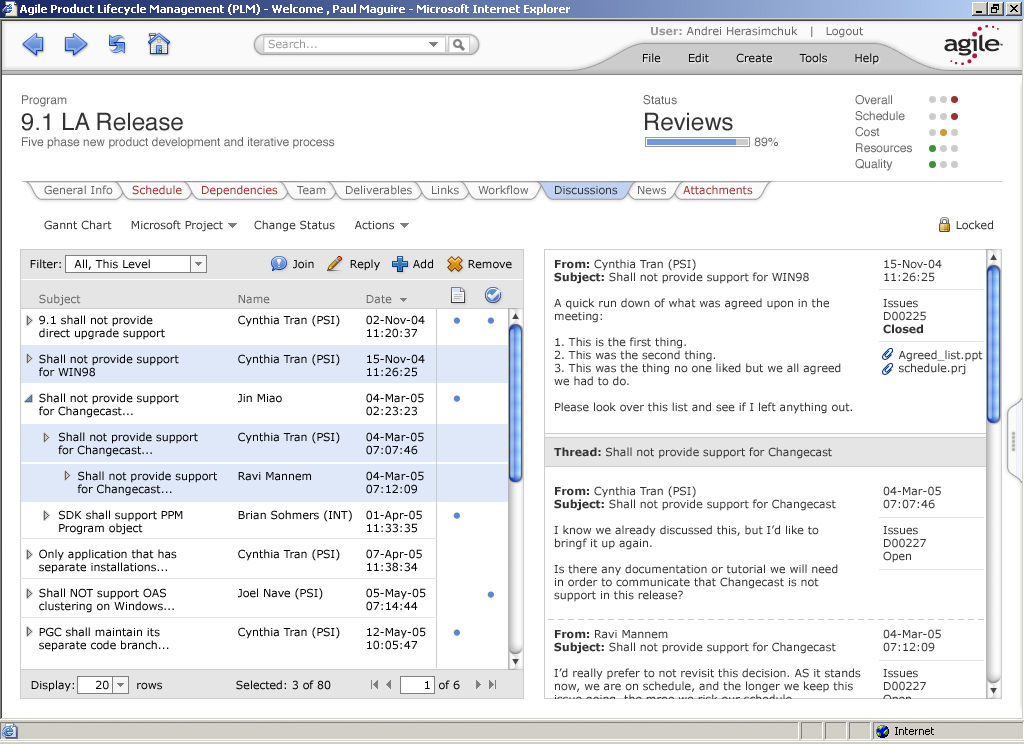
<style>
.page{position:relative;width:1024px;height:744px;background:#ffffff}
.page>*{position:absolute;margin:0}
.t1{font:11px "Verdana";color:#666666}
.t2{font:11px "Verdana-Bold";color:#999999}
.t3{font:11px "Verdana";color:#999999}
.t4{font:11px "Verdana";color:#000000}
.t5{font:12px/16px "Helvetica";color:#666666}
.t6{font:24px/26px "Helvetica";color:#333333}
.t7{font:32px/16px "Helvetica";color:#cccccc}
.t8{font:32px/16px "Helvetica";color:#993333}
.t9{font:32px/16px "Helvetica";color:#cc9933}
.t10{font:32px/16px "Helvetica";color:#339933}
.t11{font:11px "Verdana";color:#993333}
.t12{font:11px "Verdana";color:#333333}
.t13{font:11px/13px "Verdana";color:#333333}
.t14{font:11px/13px "Verdana-Bold";color:#333333}
.t15{font:11px/13px "Verdana";color:#000000}
</style>
<div class="page">
<p class="t1" style="left:651px;top:26px;width:212px;height:12px"><span class="t2">User: </span>Andrei Herasimchuk   |   Logout</p>
<p class="t3" style="left:268px;top:39px;width:49px;height:10px">Search...</p>
<p class="t4" style="left:643px;top:53px;width:236px;height:12px">File       Edit       Create       Tools       Help</p>
<p class="t5" style="left:21px;top:95px;width:314px;height:54px">Program<br><span class="t6">9.1 LA Release<br></span>Five phase new product development and iterative process</p>
<p class="t6" style="left:643px;top:95px;width:135px;height:52px"><span class="t5">Status<br></span>Reviews<br><span class="t5">    89%</span></p>
<p class="t5" style="left:855px;top:95px;width:103px;height:76px">Overall <span class="t7">••</span><span class="t8">•<br></span>Schedule <span class="t7">••</span><span class="t8">•<br></span>Cost  <span class="t7">•</span><span class="t9">•</span><span class="t7">•<br></span>Resources <span class="t10">•</span><span class="t7">••<br></span>Quality <span class="t10">•</span><span class="t7">••</span></p>
<p class="t1" style="left:44px;top:185px;width:69px;height:10px">General Info</p>
<p class="t11" style="left:132px;top:185px;width:50px;height:10px">Schedule</p>
<p class="t11" style="left:202px;top:185px;width:76px;height:12px">Dependencies</p>
<p class="t1" style="left:346px;top:185px;width:66px;height:10px">Deliverables</p>
<p class="t1" style="left:432px;top:185px;width:27px;height:10px">Links</p>
<p class="t1" style="left:478px;top:185px;width:51px;height:10px">Workflow</p>
<p class="t11" style="left:683px;top:185px;width:70px;height:10px">Attachments</p>
<p class="t1" style="left:297px;top:186px;width:29px;height:9px">Team</p>
<p class="t12" style="left:555px;top:186px;width:63px;height:9px">Discussions</p>
<p class="t1" style="left:638px;top:186px;width:28px;height:9px">News</p>
<p class="t12" style="left:44px;top:220px;width:350px;height:12px">Gannt Chart     Microsoft Project        Change Status     Actions</p>
<p class="t12" style="left:956px;top:220px;width:37px;height:10px">Locked</p>
<p class="t4" style="left:30px;top:259px;width:120px;height:11px">Filter:   All, This Level</p>
<p class="t4" style="left:293px;top:260px;width:21px;height:9px">Join</p>
<p class="t4" style="left:350px;top:259px;width:30px;height:12px">Reply</p>
<p class="t4" style="left:413px;top:259px;width:20px;height:10px">Add</p>
<p class="t4" style="left:468px;top:260px;width:44px;height:9px">Remove</p>
<p class="t13" style="left:554px;top:259px;width:298px;height:155px"><span class="t14">From:</span> Cynthia Tran (PSI)<br><span class="t14">Subject:</span> Shall not provide support for WIN98<br><br>A quick run down of what was agreed upon in the <br>meeting:<br><br>1. This is the first thing.<br>2. This was the second thing.<br>3. This was the thing no one liked but we all agreed<br>we had to do.<br><br>Please look over this list and see if I left anything out.</p>
<p class="t13" style="left:883px;top:259px;width:100px;height:116px">15-Nov-04<br>11:26:25<br><br>Issues<br>D00225<br><span class="t14">Closed<br><br></span>    Agreed_list.ppt<br>    schedule.prj</p>
<p class="t15" style="left:39px;top:294px;width:178px;height:358px"><span class="t1">Subject<br><br></span>9.1 shall not provide <br>direct upgrade support<br><br>Shall not provide support<br>for WIN98<br><br>Shall not provide support<br>for Changecast...<br><br>     Shall not provide support<br>     for Changecast...<br><br>          Shall not provide support<br>          for Changecast...<br><br>     SDK shall support PPM<br>     Program object<br><br>Only application that has<br>separate installations...<br><br>Shall NOT support OAS<br>clustering on Windows...<br><br>PGC shall maintain its<br>separate code branch...</p>
<p class="t15" style="left:238px;top:295px;width:114px;height:344px"><span class="t1">Name<br><br></span>Cynthia Tran (PSI)<br><br><br>Cynthia Tran (PSI)<br><br><br>Jin Miao<br><br><br>Cynthia Tran (PSI)<br><br><br>Ravi Mannem<br><br><br>Brian Sohmers (INT)<br><br><br>Cynthia Tran (PSI)<br><br><br>Joel Nave (PSI)<br><br><br>Cynthia Tran (PSI)</p>
<p class="t15" style="left:366px;top:295px;width:60px;height:355px"><span class="t1">Date<br><br></span>02-Nov-04<br>11:20:37<br><br>15-Nov-04<br>11:26:25<br><br>04-Mar-05<br>02:23:23<br><br>04-Mar-05<br>07:07:46<br><br>04-Mar-05<br>07:12:09<br><br>01-Apr-05<br>11:33:35<br><br>07-Apr-05<br>11:38:34<br><br>05-May-05<br>07:14:44<br><br>12-May-05<br>10:05:47</p>
<p class="t13" style="left:554px;top:447px;width:307px;height:259px"><span class="t14">Thread: </span>Shall not provide support for Changecast<br><span class="t14"><br><br>From:</span> Cynthia Tran (PSI)<br><span class="t14">Subject:</span> Shall not provide support for Changecast<br><br>I know we already discussed this, but I’d like to<br>bringf it up again. <br><br>Is there any documentation or tutorial we will need<br>in order to communicate that Changecast is not<br>support in this release?<br><br><br><span class="t14">From:</span> Ravi Mannem<br><span class="t14">Subject:</span> Shall not provide support for Changecast<br><br>I’d really prefer to not revisit this decision. AS it stands<br>now, we are on schedule, and the longer we keep this<br>issue going, the mroe we risk our schedule.</p>
<p class="t13" style="left:883px;top:486px;width:58px;height:220px">04-Mar-05<br>07:07:46<br><br>Issues<br>D00227<br>Open<br><br><br><br><br><br>04-Mar-05<br>07:12:09<br><br>Issues<br>D00227<br>Open</p>
<p class="t4" style="left:31px;top:680px;width:131px;height:12px">Display:     20       rows</p>
<p class="t4" style="left:236px;top:680px;width:95px;height:10px">Selected: 3 of 80</p>
<p class="t4" style="left:425px;top:680px;width:35px;height:10px">1  of 6</p>
</div>
